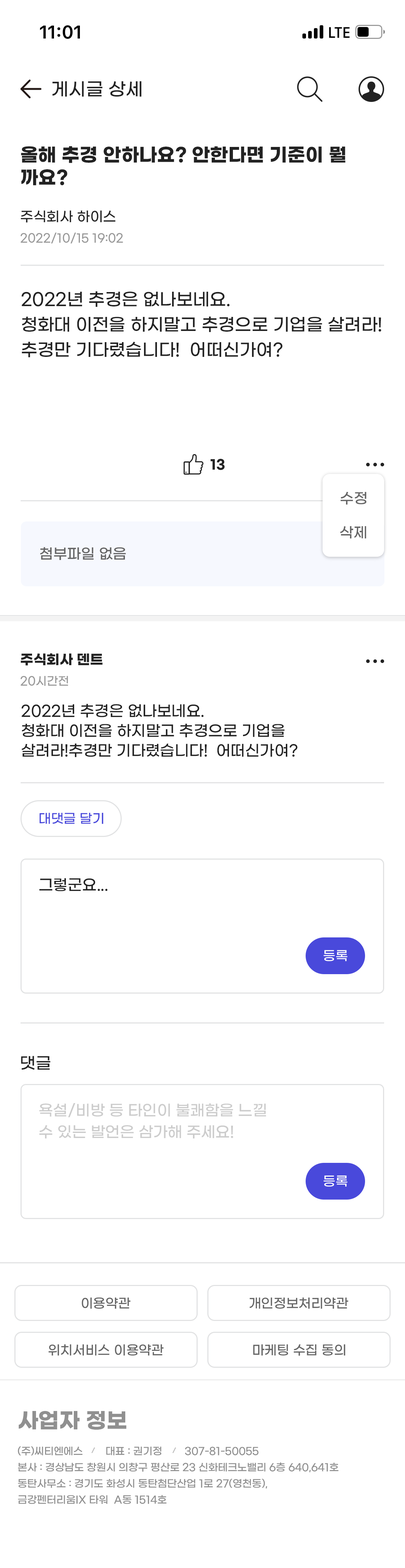
<style>
.page{position:relative;width:405px;height:1568px;background:#ffffff}
.page>*{position:absolute;margin:0}
.t1{font:18px "GmarketSansMedium";color:#222222}
.t2{font:18.7px "GmarketSansBold";color:#222222}
.t3{font:13.7px "GmarketSansMedium";color:#222222}
.t4{font:11.5px "GmarketSansMedium";color:#999999}
.t5{font:17.3px/25.2px "GmarketSansMedium";color:#222222}
.t6{font:13px "GmarketSansBold";color:#222222}
.t7{font:14.4px "GmarketSansMedium";color:#666666}
.t8{font:13.7px "GmarketSansBold";color:#222222}
.t9{font:15.1px/19.8px "GmarketSansMedium";color:#222222}
.t10{font:13px "GmarketSansMedium";color:#4949db}
.t11{font:15.1px "GmarketSansMedium";color:#222222}
.t12{font:13px "GmarketSansMedium";color:#ffffff}
.t13{font:16.2px "GmarketSansMedium";color:#222222}
.t14{font:15.1px/21.6px "GmarketSansMedium";color:#cccccc}
.t15{font:13px "GmarketSansMedium";color:#666666}
.t16{font:21.6px "GmarketSansBold";color:#909090}
.t17{font:10.1px/16.2px "GmarketSansMedium";color:#909090}
</style>
<div class="page">
<p class="t1" style="left:52px;top:81px;width:90px;height:16px">게시글 상세</p>
<p class="t2" style="left:21px;top:146px;width:325px;height:39px">올해 추경 안하나요? 안한다면 기준이 뭘<br>까요?</p>
<p class="t3" style="left:21px;top:210px;width:95px;height:13px">주식회사 하이스</p>
<p class="t4" style="left:21px;top:232px;width:102px;height:11px">2022/10/15 19:02</p>
<p class="t5" style="left:22px;top:291px;width:359px;height:66px">2022년 추경은 없나보네요.<br>청화대 이전을 하지말고 추경으로 기업을 살려라!<br>추경만 기다렸습니다!  어떠신가여?</p>
<p class="t6" style="left:211px;top:459px;width:14px;height:11px">13</p>
<p class="t7" style="left:341px;top:492px;width:26px;height:13px">수정</p>
<p class="t7" style="left:340px;top:526px;width:26px;height:13px">삭제</p>
<p class="t7" style="left:40px;top:547px;width:86px;height:13px">첨부파일 없음</p>
<p class="t8" style="left:21px;top:653px;width:82px;height:13px">주식회사 덴트</p>
<p class="t4" style="left:21px;top:676px;width:47px;height:10px">20시간전</p>
<p class="t9" style="left:22px;top:704px;width:275px;height:53px">2022년 추경은 없나보네요.<br>청화대 이전을 하지말고 추경으로 기업을 살려라!추경만 기다렸습니다!  어떠신가여?</p>
<p class="t10" style="left:40px;top:813px;width:63px;height:11px">대댓글 달기</p>
<p class="t11" style="left:39px;top:878px;width:69px;height:13px">그렇군요...</p>
<p class="t12" style="left:324px;top:950px;width:24px;height:11px">등록</p>
<p class="t13" style="left:21px;top:1056px;width:29px;height:14px">댓글</p>
<p class="t14" style="left:39px;top:1103px;width:227px;height:36px">욕설/비방 등 타인이 불쾌함을 느낄 <br>수 있는 발언은 삼가해 주세요!</p>
<p class="t12" style="left:324px;top:1175px;width:24px;height:12px">등록</p>
<p class="t15" style="left:82px;top:1297px;width:49px;height:12px">이용약관</p>
<p class="t15" style="left:250px;top:1297px;width:99px;height:12px">개인정보처리약관</p>
<p class="t15" style="left:49px;top:1344px;width:115px;height:12px">위치서비스 이용약관</p>
<p class="t15" style="left:253px;top:1344px;width:92px;height:12px">마케팅 수집 동의</p>
<p class="t16" style="left:19px;top:1411px;width:107px;height:19px">사업자 정보</p>
<p class="t17" style="left:18px;top:1446px;width:321px;height:58px">(주)씨티엔에스        대표 : 권기정        307-81-50055<br>본사 : 경상남도 창원시 의창구 평산로 23 신화테크노밸리 6층 640,641호<br>동탄사무소 : 경기도 화성시 동탄첨단산업 1로 27(영천동),<br>금강펜터리움IX 타워  A동 1514호</p>
</div>
